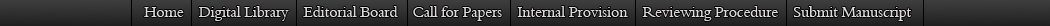
<style>
.page{position:relative;width:1050px;height:26px}
.page>*{position:absolute;margin:0}
.t1{font:15.6px "TraditionalArabic";color:#dedada}
</style>
<div class="page">
<p class="t1" style="left:144px;top:6px;width:767px;height:15px">Home    Digital Library    Editorial Board    Call for Papers    Internal Provision    Reviewing Procedure    Submit Manuscript</p>
</div>
